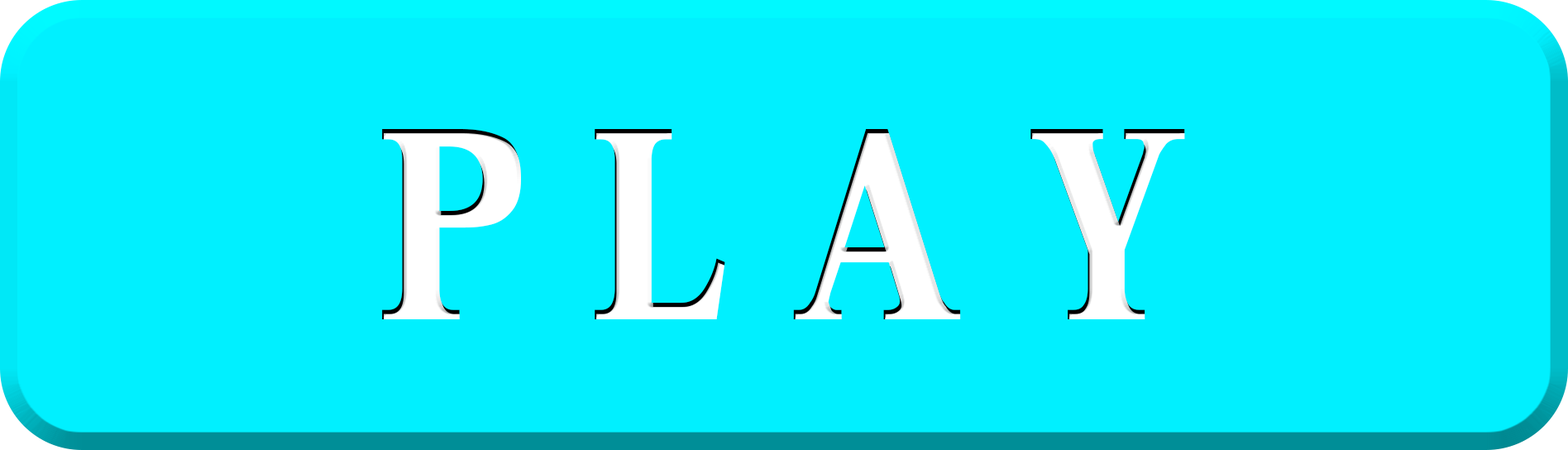
<style>
.page{position:relative;width:1568px;height:450px;background:#00f0ff}
.page>*{position:absolute;margin:0}
.t1{font:394.8px "KodchiangUPCBold";letter-spacing:0.16em;color:#ffffff}
</style>
<div class="page">
<p class="t1" style="left:382px;top:129px;width:803px;height:190px">PLAY</p>
</div>
